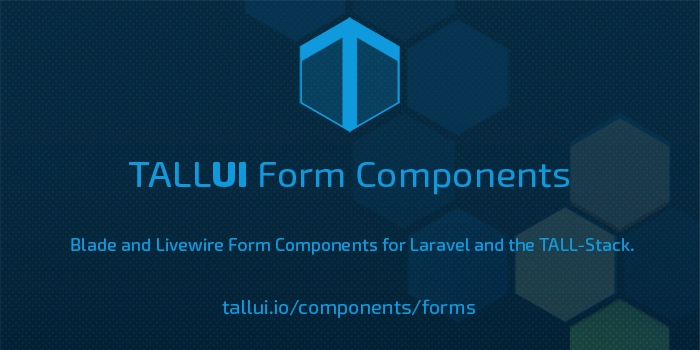
<style>
.page{position:relative;width:700px;height:350px}
.page>*{position:absolute;margin:0}
.t1{font:36px "ExoSoft-Regular";color:#0e9adc;scale:1.05 1}
.t2{font:36px "ExoSoft-Medium";color:#0e9adc;scale:1.05 1}
.t3{font:36px "ExoSoft-ExtraBold";color:#0e9adc;scale:1.05 1}
.t4{font:18px "ExoSoft-Medium";color:#0e9adc}
.t5{font:20px "ExoSoft-Regular";color:#0e9adc}
</style>
<div class="page">
<p class="t1" style="left:129px;top:162px;width:440px;height:33px"><span class="t2">TALL</span><span class="t3">UI </span>Form Components</p>
<p class="t4" style="left:71px;top:238px;width:563px;height:17px">Blade and Livewire Form Components for Laravel and the TALL-Stack.</p>
<p class="t5" style="left:222px;top:299px;width:253px;height:19px">tallui.io/components/forms</p>
</div>
